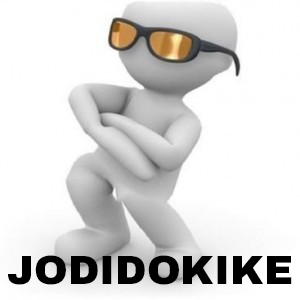
<style>
.page{position:relative;width:300px;height:300px;background:#ffffff}
.page>*{position:absolute;margin:0}
.t1{font:40.6px "ArchivoBlack-Regular";color:#000000}
</style>
<div class="page">
<p class="t1" style="left:8px;top:255px;width:284px;height:30px">JODIDOKIKE</p>
</div>
